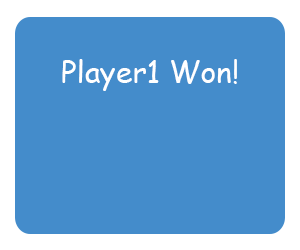
<style>
.page{position:relative;width:300px;height:250px;background:#448ccb}
.page>*{position:absolute;margin:0}
.t1{font:30px "ComicSansMS";color:#ffffff}
</style>
<div class="page">
<p class="t1" style="left:62px;top:59px;width:175px;height:32px">Player1 Won!</p>
</div>
